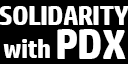
<style>
.page{position:relative;width:128px;height:64px;background:#000000}
.page>*{position:absolute;margin:0}
.t1{font:26.7px "HPSimplified-Bold";letter-spacing:-0.025em;color:#ffffff}
.t2{font:42.1px "HPSimplified-Bold";letter-spacing:-0.025em;color:#ffffff}
.t3{font:26.3px "HPSimplified-Bold";letter-spacing:-0.025em;color:#ffffff}
</style>
<div class="page">
<p class="t1" style="left:0px;top:6px;width:129px;height:19px">SOLIDARITY</p>
<p class="t2" style="left:57px;top:29px;width:69px;height:30px">PDX</p>
<p class="t3" style="left:3px;top:39px;width:47px;height:19px">with</p>
</div>
